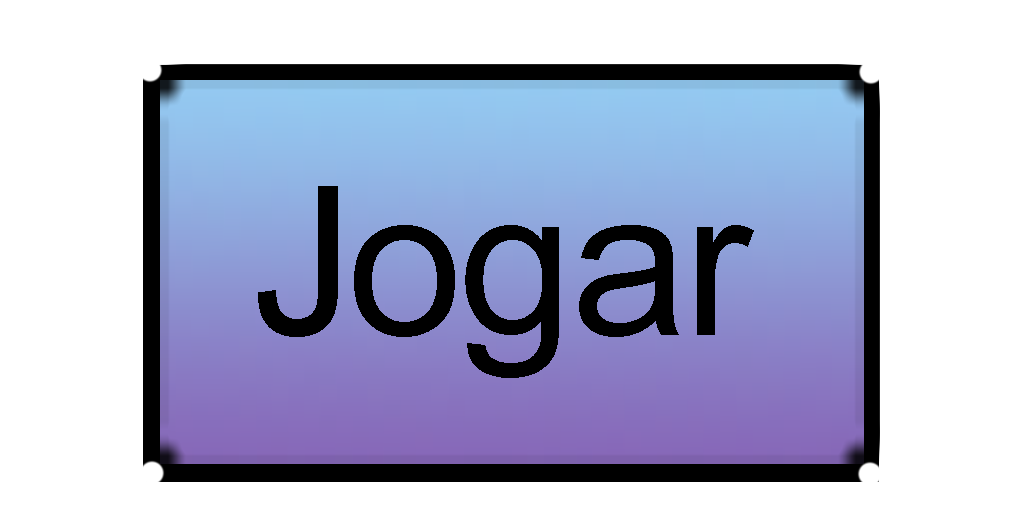
<style>
.page{position:relative;width:1024px;height:512px;background:#ffffff}
.page>*{position:absolute;margin:0}
.t1{font:208px "ArialMT";color:#000000}
</style>
<div class="page">
<p class="t1" style="left:258px;top:186px;width:496px;height:192px">Jogar</p>
</div>
